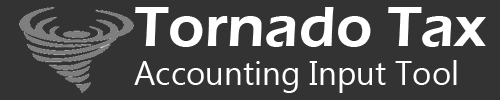
<style>
.page{position:relative;width:500px;height:100px;background:#333333}
.page>*{position:absolute;margin:0}
.t1{font:59.1px "ErasITC-Demi";color:#ffffff}
.t2{font:33.1px "Gadugi";color:#ffffff}
</style>
<div class="page">
<p class="t1" style="left:135px;top:7px;width:351px;height:40px">Tornado Tax</p>
<p class="t2" style="left:134px;top:60px;width:323px;height:33px">Accounting Input Tool</p>
</div>
